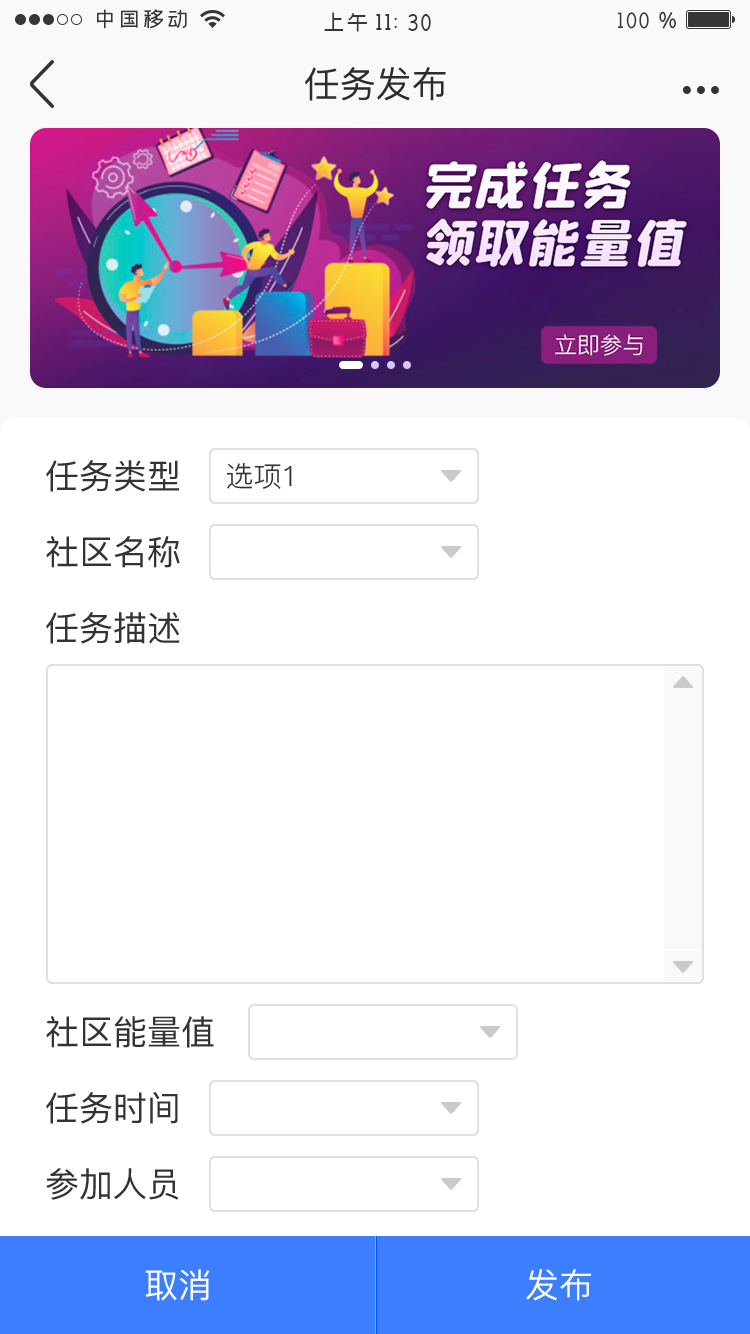
<style>
.page{position:relative;width:750px;height:1334px;background:#ffffff}
.page>*{position:absolute;margin:0}
.t1{font:36px "PingFang-SC-Medium";color:#2c2c2c;text-transform:uppercase}
.t2{font:34px "PingFang-SC-Medium";color:#333333}
.t3{font:28px "PingFang-SC-Regular";color:#333333}
.t4{font:34px "PingFang-SC-Medium";letter-spacing:0.015em;color:#ffffff}
</style>
<div class="page">
<p class="t1" style="left:305px;top:67px;width:141px;height:34px">任务发布</p>
<p class="t2" style="left:46px;top:460px;width:133px;height:32px">任务类型</p>
<p class="t3" style="left:226px;top:462px;width:66px;height:27px">选项1</p>
<p class="t2" style="left:46px;top:536px;width:134px;height:32px">社区名称</p>
<p class="t2" style="left:46px;top:612px;width:134px;height:32px">任务描述</p>
<p class="t2" style="left:46px;top:1016px;width:168px;height:32px">社区能量值</p>
<p class="t2" style="left:46px;top:1092px;width:132px;height:32px">任务时间</p>
<p class="t2" style="left:46px;top:1168px;width:133px;height:32px">参加人员</p>
<p class="t4" style="left:145px;top:1269px;width:65px;height:32px">取消</p>
<p class="t4" style="left:526px;top:1269px;width:65px;height:32px">发布</p>
</div>
